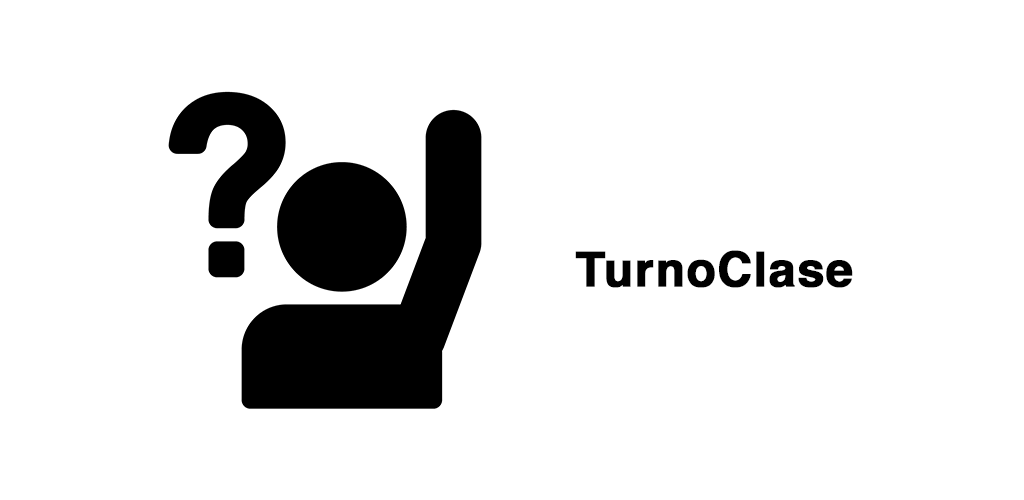
<style>
.page{position:relative;width:1024px;height:500px;background:#ffffff}
.page>*{position:absolute;margin:0}
.t1{font:48px "Helvetica-Bold";letter-spacing:0.01em;color:#000000;font-weight:bold}
</style>
<div class="page">
<p class="t1" style="left:575px;top:250px;width:278px;height:38px">TurnoClase</p>
</div>
